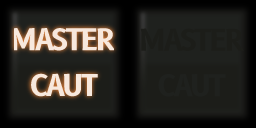
<style>
.page{position:relative;width:256px;height:128px}
.page>*{position:absolute;margin:0}
.t1{font:29.2px "B612-Bold";letter-spacing:-0.075em;color:#1c1d19}
.t2{font:29.2px "B612-Bold";letter-spacing:-0.075em;color:#1f211e}
</style>
<div class="page">
<p class="t1" style="left:140px;top:28px;width:104px;height:23px">MASTER</p>
<p class="t2" style="left:158px;top:74px;width:68px;height:23px">CAUT</p>
</div>
